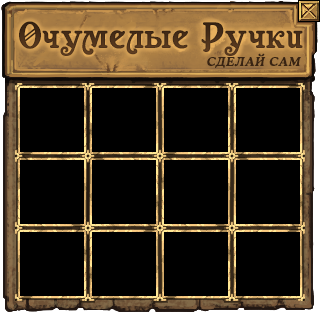
<style>
.page{position:relative;width:320px;height:320px;background:#000000}
.page>*{position:absolute;margin:0}
.t1{font:36.8px "Casanova";letter-spacing:0.01em;color:#3e2817}
.t2{font:12.1px "CooperLightCBT-Bold";letter-spacing:0.05em;color:#392413;text-transform:uppercase;font-style:italic}
</style>
<div class="page">
<p class="t1" style="left:19px;top:21px;width:284px;height:35px">Очумелые Ручки</p>
<p class="t2" style="left:207px;top:53px;width:94px;height:15px">сделай сам</p>
</div>
